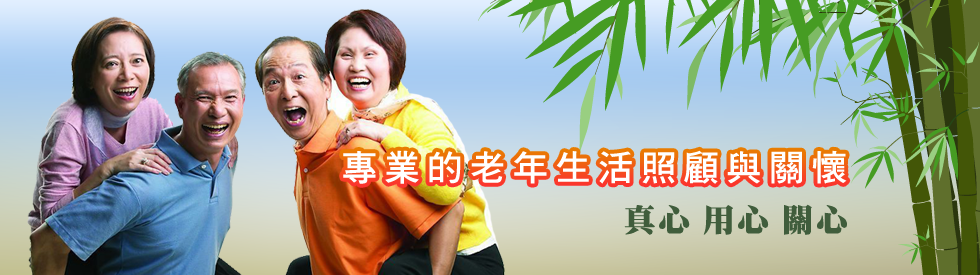
<style>
.page{position:relative;width:980px;height:275px}
.page>*{position:absolute;margin:0}
.t1{font:35.6px "DFHei-W7-WINP-BF";letter-spacing:0.2em;color:#ffffff;text-transform:uppercase}
.t2{font:31.8px "DFMing-UB-HKP-BF";letter-spacing:0.075em;color:#405c3b;text-transform:uppercase}
</style>
<div class="page">
<p class="t1" style="left:343px;top:150px;width:504px;height:34px">專業的老年生活照顧與關懷</p>
<p class="t2" style="left:624px;top:204px;width:223px;height:31px">真心 用心 關心</p>
</div>
